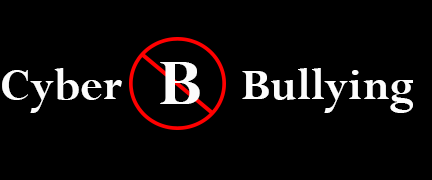
<style>
.page{position:relative;width:432px;height:180px;background:#000000}
.page>*{position:absolute;margin:0}
.t1{font:48px "Perpetua-Bold";color:#fcfcfc}
</style>
<div class="page">
<p class="t1" style="left:2px;top:68px;width:411px;height:45px">Cyber           Bullying</p>
</div>
